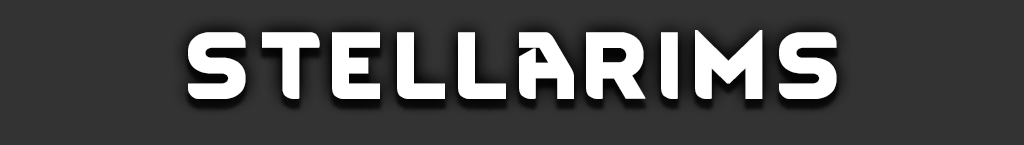
<style>
.page{position:relative;width:1024px;height:145px;background:#333333}
.page>*{position:absolute;margin:0}
.t1{font:79.8px "RimWordFont";letter-spacing:0.035em;color:#ffffff;font-weight:bold}
</style>
<div class="page">
<p class="t1" style="left:188px;top:30px;width:649px;height:69px">Stellarims</p>
</div>
